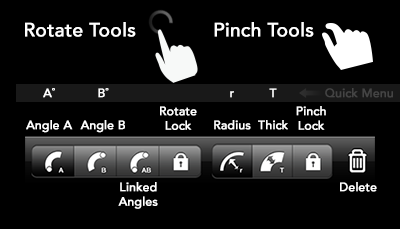
<style>
.page{position:relative;width:400px;height:229px;background:#000000}
.page>*{position:absolute;margin:0}
.t1{font:19px "Avenir-Medium";color:#ffffff;font-weight:bold}
.t2{font:12px/16px "Avenir-Medium";color:#ffffff;font-weight:bold}
.t3{font:12px "Avenir-Medium";color:#444444;font-weight:bold}
.t4{font:12px "Avenir-Medium";color:#ffffff;font-weight:bold}
</style>
<div class="page">
<p class="t1" style="left:25px;top:22px;width:111px;height:15px">Rotate Tools</p>
<p class="t1" style="left:214px;top:22px;width:100px;height:15px">Pinch Tools</p>
<p class="t2" style="left:26px;top:88px;width:47px;height:45px;text-align:center">A˚<br><br>Angle A</p>
<p class="t2" style="left:80px;top:88px;width:45px;height:45px;text-align:center">B˚<br><br>Angle B</p>
<p class="t2" style="left:258px;top:88px;width:30px;height:42px;text-align:center">T<br><br>Thick</p>
<p class="t3" style="left:325px;top:88px;width:68px;height:10px">Quick Menu</p>
<p class="t2" style="left:214px;top:91px;width:37px;height:39px;text-align:center">r<br><br>Radius</p>
<p class="t4" style="left:160px;top:106px;width:37px;height:24px;text-align:center">Rotate<br>Lock</p>
<p class="t4" style="left:296px;top:106px;width:30px;height:24px;text-align:center">Pinch<br>Lock</p>
<p class="t4" style="left:118px;top:182px;width:40px;height:27px;text-align:center">Linked <br>Angles</p>
<p class="t4" style="left:340px;top:182px;width:37px;height:10px">Delete</p>
</div>
